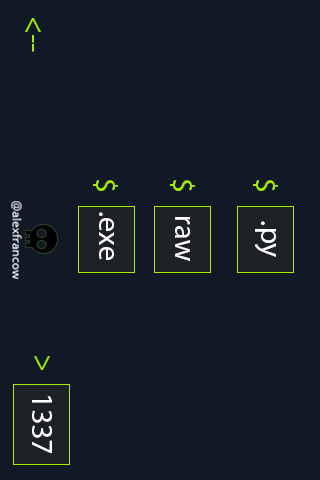
<style>
.page{position:relative;width:320px;height:480px;background:#111927}
.page>*{position:absolute;margin:0}
.t1{font:30px "MyriadPro-Regular";color:#9fef00}
.t2{font:12px "OpenSans-Regular";color:#ffffff}
.t3{font:30px "MyriadPro-Regular";color:#ffffff}
</style>
<div class="page">
<p class="t1" style="left:25px;top:18px;width:16px;height:34px;rotate:90deg">&lt;--</p>
<p class="t1" style="left:93px;top:180px;width:25px;height:11px;rotate:90deg">$</p>
<p class="t1" style="left:170px;top:180px;width:25px;height:11px;rotate:90deg">$</p>
<p class="t1" style="left:253px;top:180px;width:25px;height:11px;rotate:90deg">$</p>
<p class="t2" style="left:11px;top:201px;width:11px;height:78px;rotate:90deg">@alexfrancow</p>
<p class="t3" style="left:99px;top:212px;width:15px;height:48px;rotate:90deg">.exe</p>
<p class="t3" style="left:175px;top:217px;width:15px;height:44px;rotate:90deg">raw</p>
<p class="t3" style="left:254px;top:221px;width:22px;height:36px;rotate:90deg">.py</p>
<p class="t1" style="left:34px;top:356px;width:16px;height:14px;rotate:90deg">&gt;</p>
<p class="t3" style="left:32px;top:396px;width:20px;height:57px;rotate:90deg">1337</p>
</div>
